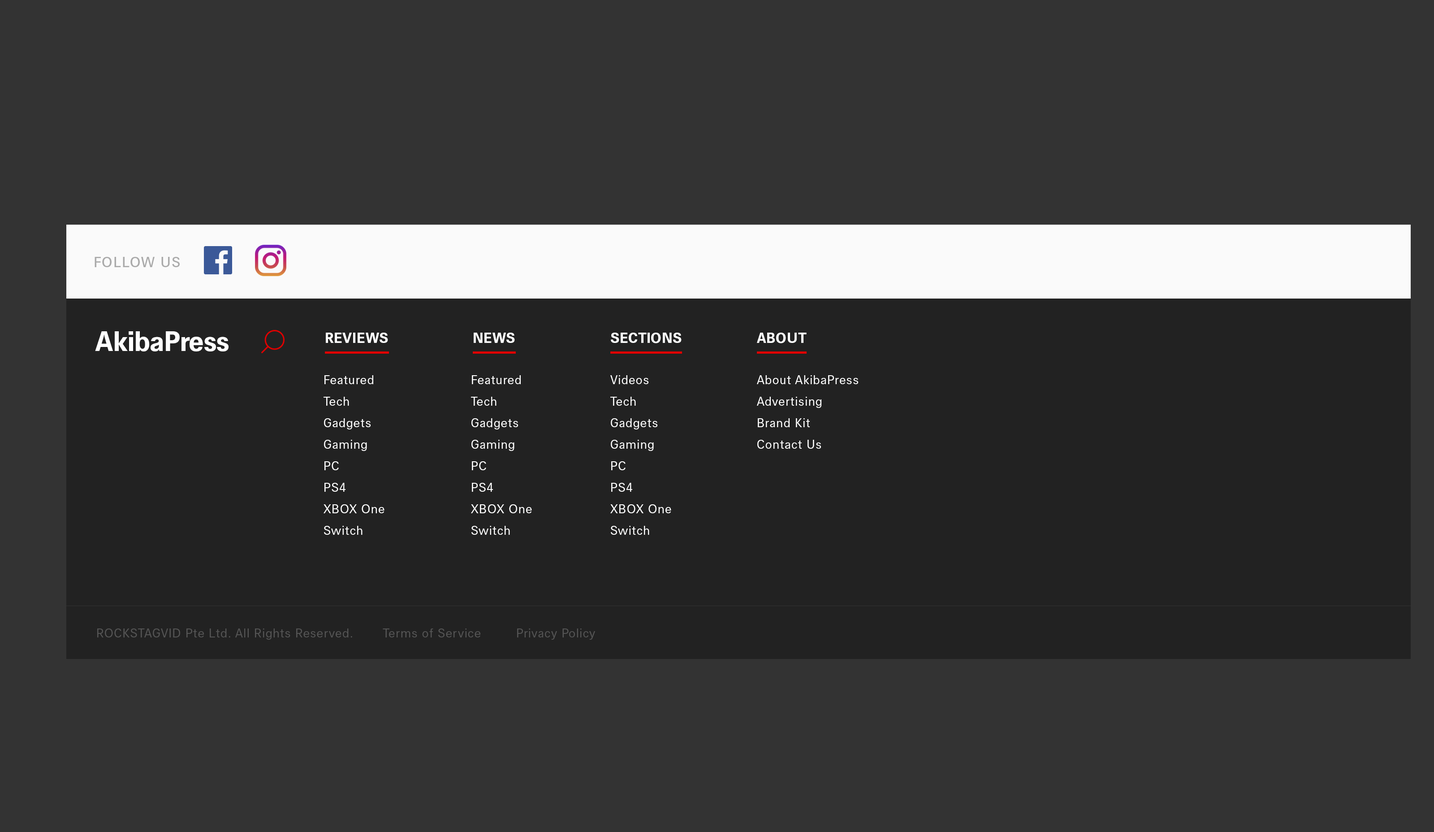
<style>
.page{position:relative;width:1434px;height:832px;background:#333333}
.page>*{position:absolute;margin:0}
.t1{font:14.3px "HansGrotesque-Medium";letter-spacing:0.06em;color:#aaaaaa;text-transform:uppercase}
.t2{font:27.8px "HansGrotesque-Bold";letter-spacing:-0.02em;color:#ffffff}
.t3{font:14.3px "HansGrotesque-Bold";letter-spacing:0.02em;color:#ffffff;text-transform:uppercase}
.t4{font:12.5px/21.5px "HansGrotesque-Regular";letter-spacing:0.04em;color:#ffffff}
.t5{font:12.5px "HansGrotesque-Regular";letter-spacing:0.04em;color:#555555}
</style>
<div class="page">
<p class="t1" style="left:95px;top:257px;width:85px;height:10px">follow us</p>
<p class="t2" style="left:95px;top:331px;width:134px;height:20px">AkibaPress</p>
<p class="t3" style="left:326px;top:332px;width:62px;height:11px">REviews</p>
<p class="t3" style="left:474px;top:332px;width:41px;height:11px">News</p>
<p class="t3" style="left:611px;top:332px;width:71px;height:11px">Sections</p>
<p class="t3" style="left:757px;top:332px;width:50px;height:11px">about</p>
<p class="t4" style="left:324px;top:375px;width:60px;height:160px">Featured<br>Tech<br>Gadgets<br>Gaming<br>PC<br>PS4<br>XBOX One<br>Switch</p>
<p class="t4" style="left:471px;top:375px;width:61px;height:160px">Featured<br>Tech<br>Gadgets<br>Gaming<br>PC<br>PS4<br>XBOX One<br>Switch</p>
<p class="t4" style="left:610px;top:375px;width:61px;height:160px">Videos<br>Tech<br>Gadgets<br>Gaming<br>PC<br>PS4<br>XBOX One<br>Switch</p>
<p class="t4" style="left:757px;top:375px;width:101px;height:74px">About AkibaPress<br>Advertising<br>Brand Kit<br>Contact Us</p>
<p class="t5" style="left:97px;top:628px;width:498px;height:11px">ROCKSTAGVID Pte Ltd. All Rights Reserved.        Terms of Service         Privacy Policy</p>
</div>
